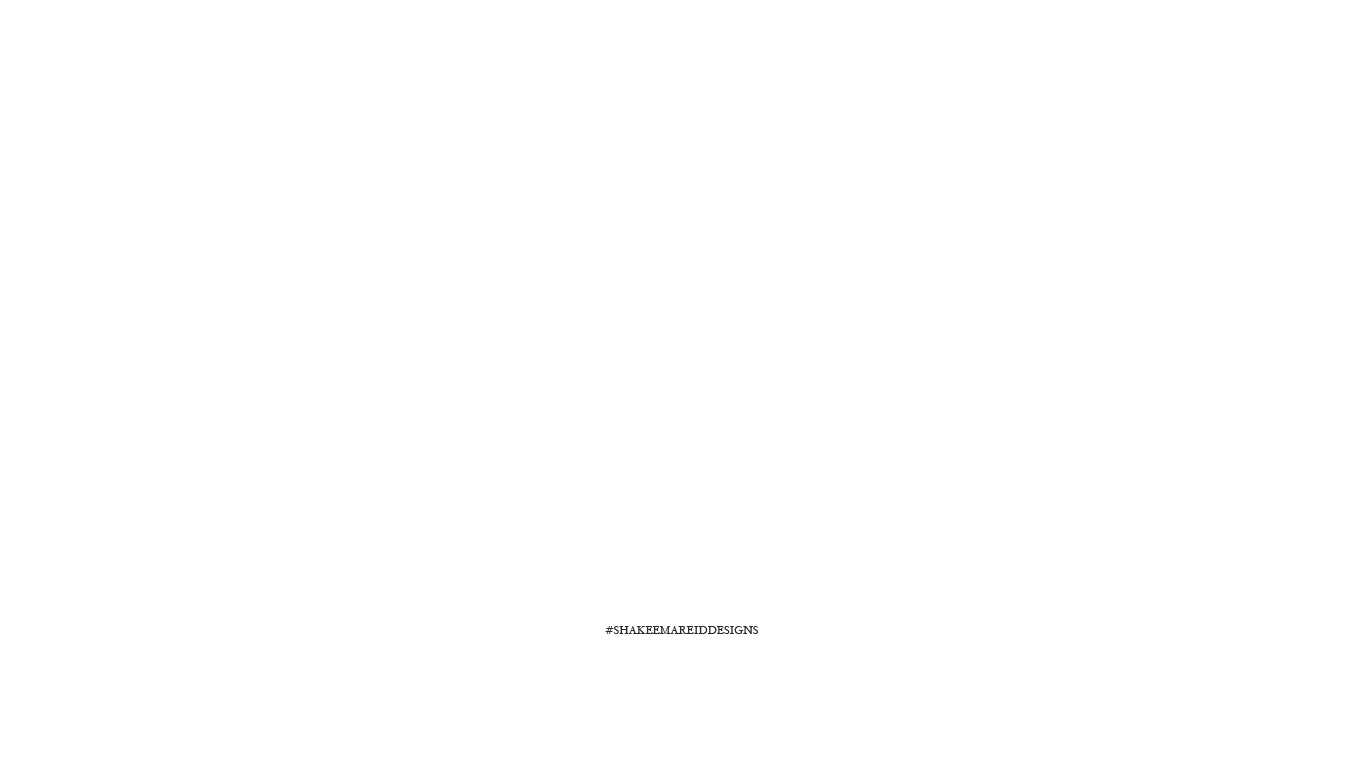
<style>
.page{position:relative;width:1366px;height:768px;background:#ffffff}
.page>*{position:absolute;margin:0}
.t1{font:11px "HoeflerText-Regular";color:#2d2c2c}
</style>
<div class="page">
<p class="t1" style="left:605px;top:626px;width:153px;height:8px">#SHAKEEMAREIDDESIGNS</p>
</div>
